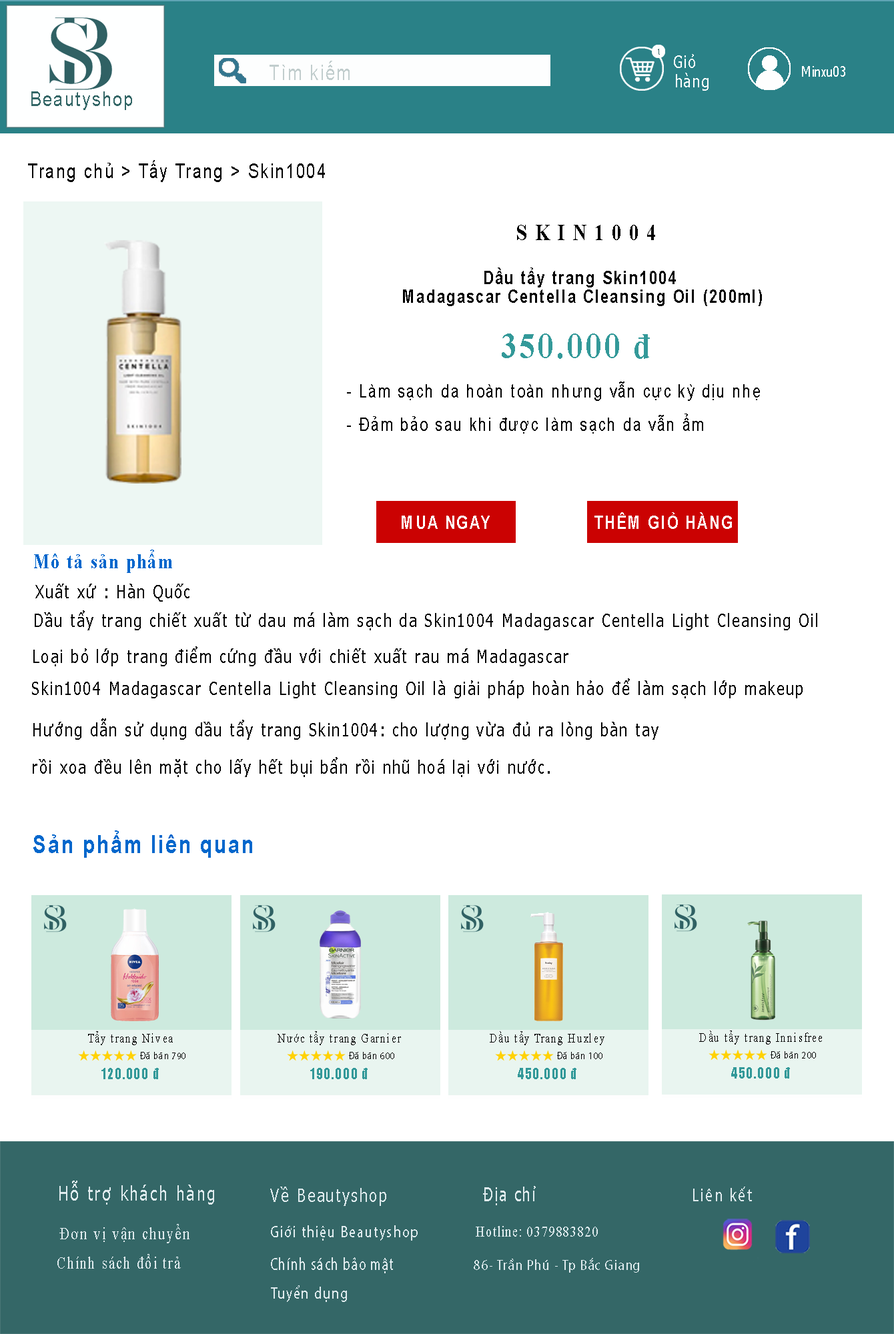
<style>
.page{position:relative;width:894px;height:1334px;background:#ffffff}
.page>*{position:absolute;margin:0}
.t1{font:8.3px "Tahoma";letter-spacing:0.1em;color:#336666;scale:0.83 1}
.t2{font:21.1px "ArialMT";letter-spacing:0.1em;color:#c1cdcd;scale:0.8 1}
.t3{font:17.6px "Tahoma";letter-spacing:0.1em;color:#ffffff;scale:0.8 1}
.t4{font:17.1px "Tahoma";letter-spacing:0.1em;color:#ffffff;scale:0.8 1}
.t5{font:13.9px "Tahoma";color:#ffffff;scale:0.8 1}
.t6{font:20.7px "ArialMT";letter-spacing:0.1em;color:#336666;scale:0.8 1}
.t7{font:19.7px "ArialMT";letter-spacing:0.1em;color:#000000;scale:0.8 1}
.t8{font:22.8px "TimesNewRomanPS-BoldMT";letter-spacing:0.1em;color:#000000;scale:0.8 1}
.t9{font:18.2px/18.5px "Arial-BoldMT";letter-spacing:0.1em;color:#000000;scale:0.8 1}
.t10{font:18.2px/3.6px "Arial-BoldMT";letter-spacing:0.1em;color:#000000;scale:0.8 1}
.t11{font:36.6px "TimesNewRomanPS-BoldMT";letter-spacing:0.1em;color:#339999;scale:0.83 1}
.t12{font:18.2px "ArialMT";letter-spacing:0.1em;color:#000000;scale:0.8 1}
.t13{font:18.2px "Arial-BoldMT";letter-spacing:0.1em;color:#ffffff;scale:0.8 1}
.t14{font:20.5px "TimesNewRomanPS-BoldMT";letter-spacing:0.1em;color:#0066cc;scale:0.8 1}
.t15{font:18.2px "Tahoma";letter-spacing:0.1em;color:#000000;scale:0.8 1}
.t16{font:18.2px/18.5px "Tahoma";letter-spacing:0.1em;color:#000000;scale:0.8 1}
.t17{font:24.6px "Arial-BoldMT";letter-spacing:0.1em;color:#0167cc;scale:0.8 1}
.t18{font:13.1px "TimesNewRomanPSMT";letter-spacing:0.1em;color:#000000;scale:0.8 1}
.t19{font:10px "MyriadPro-Regular";letter-spacing:0.1em;color:#000000;scale:0.8 1}
.t20{font:14.8px "Impact";letter-spacing:0.1em;color:#339999;scale:0.8 1}
.t21{font:19.7px "Tahoma";letter-spacing:0.1em;color:#dfebee;scale:0.8 1}
.t22{font:18.6px "Tahoma";letter-spacing:0.1em;color:#dfebee;scale:0.8 1}
.t23{font:19.6px "Tahoma";letter-spacing:0.1em;color:#dfebee;scale:0.73 1}
.t24{font:18.4px "MyriadPro-Regular";letter-spacing:0.1em;color:#dfebee;scale:0.81 1}
.t25{font:17.4px "TimesNewRomanPSMT";letter-spacing:0.1em;color:#dfebee;scale:0.8 1}
.t26{font:16.2px "MyriadPro-Regular";letter-spacing:0.1em;color:#dfebee;scale:0.8 1}
.t27{font:14.8px "TimesNewRomanPSMT";letter-spacing:0.1em;color:#dfebee;scale:0.8 1}
.t28{font:16.9px "TimesNewRomanPSMT";letter-spacing:0.1em;color:#dfebee;scale:0.8 1}
.t29{font:17.5px "MyriadPro-Regular";letter-spacing:0.1em;color:#dfebee;scale:0.7 1}
.t30{font:14.8px "MyriadPro-Regular";letter-spacing:0.1em;color:#dfebee;scale:0.8 1}
.t31{font:16.3px "MyriadPro-Regular";letter-spacing:0.1em;color:#dfebee;scale:0.8 1}
</style>
<div class="page">
<p class="t1" style="left:658px;top:49px;width:2px;height:6px">1</p>
<p class="t2" style="left:269px;top:61px;width:81px;height:19px">Tìm kiếm</p>
<p class="t3" style="left:674px;top:54px;width:21px;height:14px">Giỏ</p>
<p class="t4" style="left:676px;top:73px;width:32px;height:18px">hàng</p>
<p class="t5" style="left:802px;top:66px;width:43px;height:11px">Minxu03</p>
<p class="t6" style="left:31px;top:91px;width:101px;height:19px">Beautyshop</p>
<p class="t7" style="left:28px;top:160px;width:297px;height:22px">Trang chủ &gt; Tẩy Trang &gt; Skin1004</p>
<p class="t8" style="left:517px;top:225px;width:138px;height:15px">S K I N 1 0 0 4</p>
<p class="t9" style="left:403px;top:267px;width:359px;height:39px;text-align:center"><span class="t10">Dầu tẩy trang Skin1004 <br></span>Madagascar Centella Cleansing Oil (200ml)</p>
<p class="t11" style="left:502px;top:334px;width:148px;height:25px">350.000 đ</p>
<p class="t12" style="left:347px;top:382px;width:413px;height:19px">- Làm sạch da hoàn toàn nhưng vẫn cực kỳ dịu nhẹ</p>
<p class="t12" style="left:347px;top:414px;width:356px;height:20px">- Đảm bảo sau khi được làm sạch da vẫn ẩm</p>
<p class="t13" style="left:402px;top:516px;width:88px;height:13px">MUA NGAY</p>
<p class="t13" style="left:594px;top:512px;width:138px;height:17px">THÊM GIỎ HÀNG</p>
<p class="t14" style="left:34px;top:550px;width:138px;height:23px">Mô tả sản phẩm</p>
<p class="t15" style="left:35px;top:584px;width:154px;height:18px">Xuất xứ : Hàn Quốc</p>
<p class="t15" style="left:35px;top:610px;width:782px;height:20px">Dầu tẩy trang chiết xuất từ dau má làm sạch da Skin1004 Madagascar Centella Light Cleansing Oil</p>
<p class="t15" style="left:33px;top:646px;width:535px;height:20px">Loại bỏ lớp trang điểm cứng đầu với chiết xuất rau má Madagascar</p>
<p class="t15" style="left:32px;top:678px;width:770px;height:20px">Skin1004 Madagascar Centella Light Cleansing Oil là giải pháp hoàn hảo để làm sạch lớp makeup</p>
<p class="t16" style="left:33px;top:718px;width:625px;height:59px">Hướng dẫn sử dụng dầu tẩy trang Skin1004: cho lượng vừa đủ ra lòng bàn tay<br> <br>rồi xoa đều lên mặt cho lấy hết bụi bẩn rồi nhũ hoá lại với nước.</p>
<p class="t17" style="left:33px;top:830px;width:219px;height:28px">Sản phẩm liên quan</p>
<p class="t18" style="left:88px;top:1031px;width:85px;height:14px">Tẩy trang Nivea</p>
<p class="t18" style="left:277px;top:1031px;width:124px;height:14px">Nước tẩy trang Garnier</p>
<p class="t18" style="left:490px;top:1031px;width:114px;height:14px">Dầu tẩy Trang Huxley</p>
<p class="t18" style="left:699px;top:1031px;width:123px;height:14px">Dầu tẩy trang Innisfree</p>
<p class="t19" style="left:140px;top:1052px;width:45px;height:7px">Đã bán 900</p>
<p class="t19" style="left:140px;top:1052px;width:45px;height:7px">Đã bán 790</p>
<p class="t19" style="left:349px;top:1052px;width:45px;height:7px">Đã bán 900</p>
<p class="t19" style="left:349px;top:1052px;width:45px;height:7px">Đã bán 600</p>
<p class="t19" style="left:557px;top:1052px;width:45px;height:7px">Đã bán 900</p>
<p class="t19" style="left:557px;top:1052px;width:45px;height:7px">Đã bán 100</p>
<p class="t19" style="left:770px;top:1051px;width:46px;height:8px">Đã bán 900</p>
<p class="t19" style="left:770px;top:1051px;width:46px;height:8px">Đã bán 200</p>
<p class="t20" style="left:101px;top:1068px;width:58px;height:11px">120.000 đ</p>
<p class="t20" style="left:310px;top:1068px;width:58px;height:11px">190.000 đ</p>
<p class="t20" style="left:518px;top:1068px;width:58px;height:11px">450.000 đ</p>
<p class="t20" style="left:731px;top:1067px;width:59px;height:12px">450.000 đ</p>
<p class="t21" style="left:59px;top:1181px;width:155px;height:24px">Hỗ trợ khách hàng</p>
<p class="t22" style="left:270px;top:1187px;width:116px;height:19px">Về Beautyshop</p>
<p class="t23" style="left:483px;top:1186px;width:53px;height:19px">Địa chỉ</p>
<p class="t24" style="left:693px;top:1187px;width:59px;height:14px">Liên kết</p>
<p class="t25" style="left:59px;top:1224px;width:130px;height:19px">Đơn vị vận chuyển</p>
<p class="t26" style="left:271px;top:1225px;width:147px;height:16px">Giới thiệu Beautyshop</p>
<p class="t27" style="left:476px;top:1226px;width:122px;height:11px">Hotline: 0379883820</p>
<p class="t28" style="left:57px;top:1254px;width:124px;height:15px">Chính sách đổi trả</p>
<p class="t29" style="left:271px;top:1257px;width:122px;height:16px">Chính sách bảo mật</p>
<p class="t30" style="left:474px;top:1258px;width:165px;height:15px">86- Trần Phú - Tp Bắc Giang</p>
<p class="t31" style="left:271px;top:1285px;width:76px;height:17px">Tuyển dụng</p>
</div>
